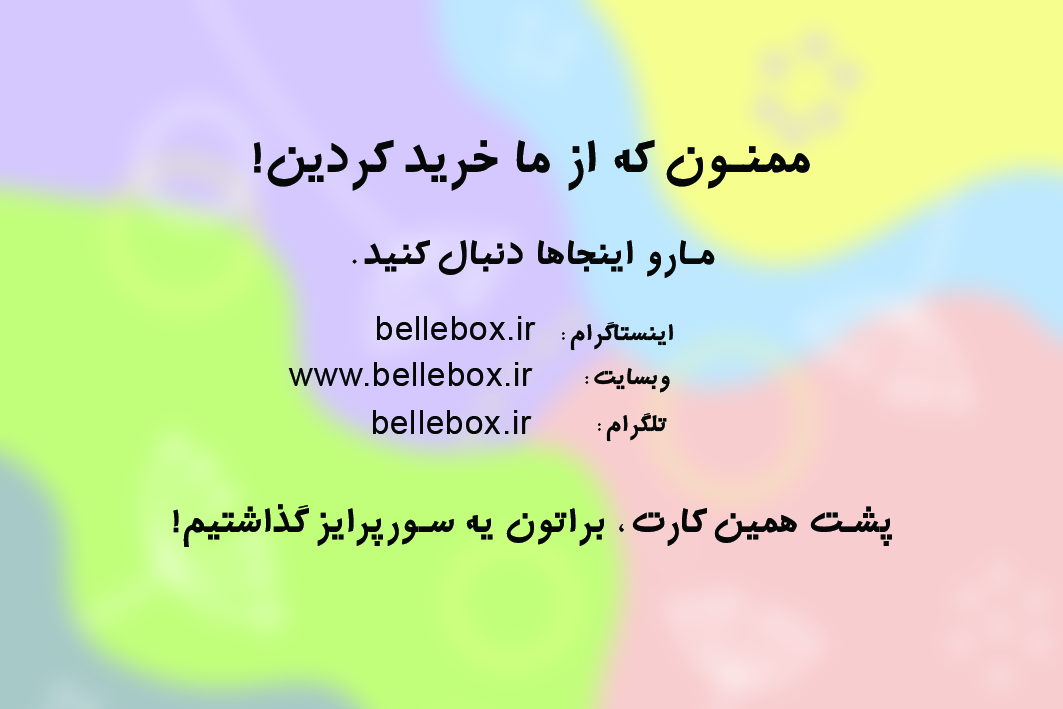
<style>
.page{position:relative;width:1063px;height:709px}
.page>*{position:absolute;margin:0}
.t1{font:50px "Wmehr";letter-spacing:0.025em;color:#060808}
.t2{font:37.5px "Wmehr";letter-spacing:0.025em;color:#060808}
.t3{font:33.3px "ArialMT";letter-spacing:0.025em;color:#060808}
.t4{font:25px "Wmehr";letter-spacing:0.025em;color:#060808}
</style>
<div class="page">
<p class="t1" style="left:254px;top:139px;width:556px;height:52px">ممنون که از ما خرید کردین!</p>
<p class="t2" style="left:352px;top:240px;width:363px;height:38px">مارو اینجاها دنبال کنید.</p>
<p class="t3" style="left:377px;top:316px;width:159px;height:24px">bellebox.ir</p>
<p class="t4" style="left:562px;top:322px;width:111px;height:29px">اینستاگرام:</p>
<p class="t3" style="left:288px;top:362px;width:245px;height:24px">www.bellebox.ir</p>
<p class="t4" style="left:585px;top:368px;width:85px;height:25px">وبسایت:</p>
<p class="t3" style="left:373px;top:410px;width:159px;height:24px">bellebox.ir</p>
<p class="t4" style="left:598px;top:413px;width:69px;height:29px">تلگرام:</p>
<p class="t2" style="left:173px;top:504px;width:719px;height:43px">پشت همین کارت، براتون یه سورپرایز گذاشتیم!</p>
</div>
